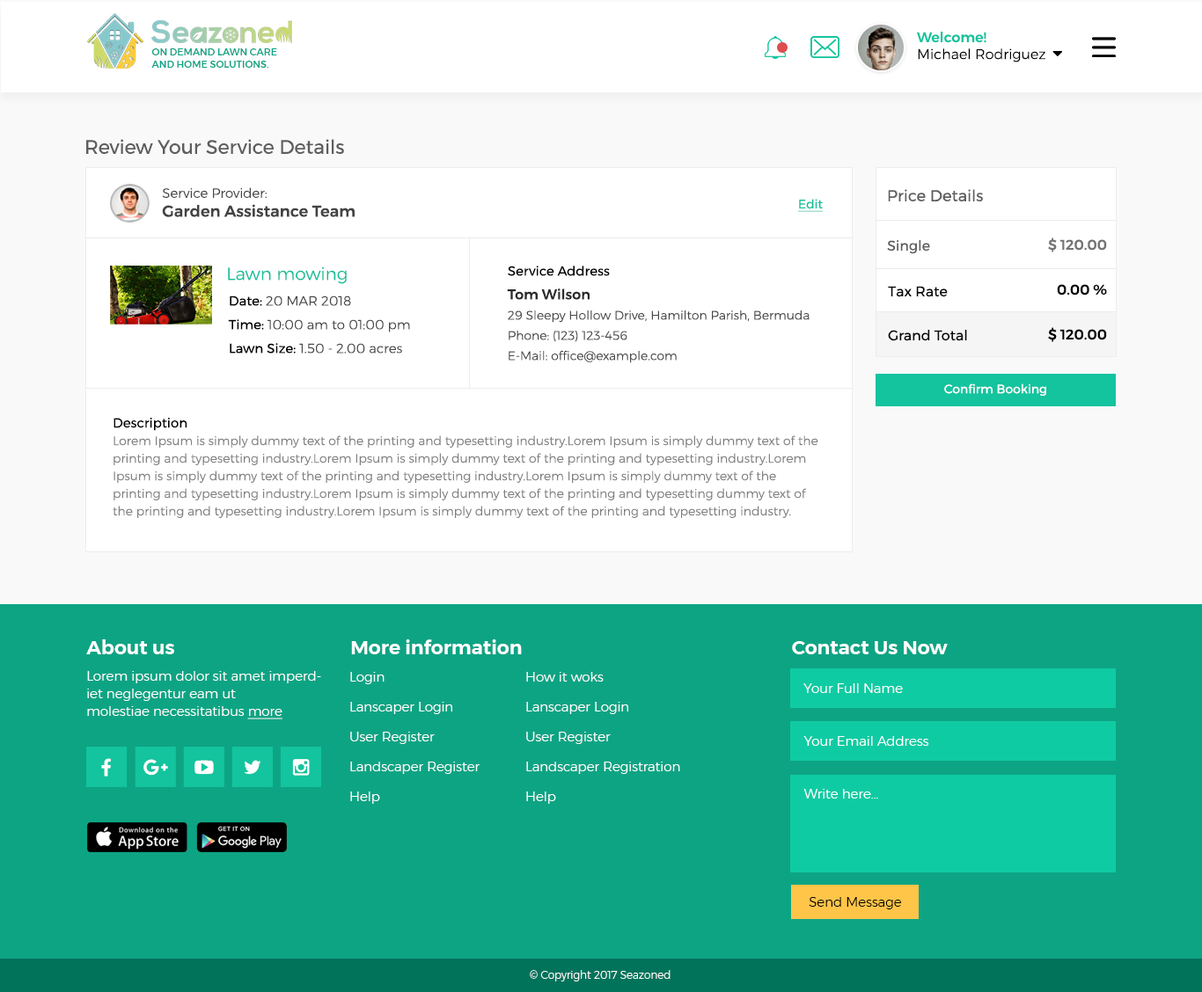
<style>
.page{position:relative;width:1202px;height:992px;background:#ffffff}
.page>*{position:absolute;margin:0}
.t1{font:14.1px "Montserrat-Light";color:#000000}
.t2{font:14.1px "Montserrat-Medium";color:#13c49e}
.t3{font:9.7px "Montserrat-Medium";color:#0da484;text-transform:uppercase}
.t4{font:19.4px "Montserrat-Regular";color:#5e5e5e}
.t5{font:15.8px "Montserrat-Medium";color:#434343}
.t6{font:13.2px "Montserrat-Light";color:#434343}
.t7{font:15.8px "Montserrat-Regular";color:#5e5e5e}
.t8{font:12.3px "Montserrat-Regular";color:#12bf9a;text-decoration:underline}
.t9{font:14.1px "Montserrat-Regular";color:#5e5e5e}
.t10{font:14.1px "Montserrat-Medium";color:#747474}
.t11{font:17.6px "Montserrat-Light";color:#12be99}
.t12{font:12.3px/20.2px "Montserrat-Light";color:#474747}
.t13{font:13.2px/23.8px "Montserrat-Regular";color:#000000}
.t14{font:14.1px/23.8px "Montserrat-Medium";color:#2b2b2b}
.t15{font:14.1px "Montserrat-Regular";color:#060606}
.t16{font:14.1px "Montserrat-Medium";color:#000000}
.t17{font:13.2px/23.8px "Montserrat-Light";color:#474747}
.t18{font:12.3px "Montserrat-Regular";color:#ffffff}
.t19{font:12.3px/17.6px "Montserrat-Light";color:#808080}
.t20{font:19.4px "Montserrat-SemiBold";color:#ffffff}
.t21{font:13.2px/17.6px "Montserrat-Light";color:#ffffff}
.t22{font:13.2px/17.6px "Montserrat-Light";color:#ffffff;text-decoration:underline}
.t23{font:13.2px/29.9px "Montserrat-Light";color:#ffffff}
.t24{font:13.2px "Montserrat-Light";color:#ffffff}
.t25{font:13.2px "Montserrat-Light";color:#000000}
.t26{font:10.6px "Montserrat-Light";color:#ffffff}
</style>
<div class="page">
<p class="t1" style="left:917px;top:32px;width:128px;height:30px"><span class="t2">Welcome! <br></span>Michael Rodriguez</p>
<p class="t3" style="left:151px;top:48px;width:126px;height:20px">on demand lawn care <br>and home solutions.</p>
<p class="t4" style="left:86px;top:139px;width:258px;height:15px">Review Your Service Details</p>
<p class="t5" style="left:162px;top:187px;width:193px;height:30px"><span class="t6">Service Provider:<br></span>Garden Assistance Team</p>
<p class="t7" style="left:888px;top:189px;width:95px;height:12px">Price Details</p>
<p class="t8" style="left:798px;top:199px;width:25px;height:13px">Edit</p>
<p class="t9" style="left:887px;top:240px;width:43px;height:14px">Single</p>
<p class="t10" style="left:1048px;top:238px;width:59px;height:14px">$ 120.00</p>
<p class="t11" style="left:228px;top:267px;width:119px;height:17px">Lawn mowing</p>
<p class="t12" style="left:507px;top:266px;width:302px;height:97px"><span class="t13">Service Address<br></span><span class="t14">Tom Wilson<br></span>29 Sleepy Hollow Drive, Hamilton Parish, Bermuda<br>Phone: (123) 123-456<br>E-Mail: office@example.com</p>
<p class="t15" style="left:888px;top:286px;width:59px;height:11px">Tax Rate</p>
<p class="t16" style="left:1057px;top:284px;width:50px;height:12px">0.00 %</p>
<p class="t17" style="left:228px;top:296px;width:182px;height:58px"><span class="t13">Date: </span>20 MAR 2018<br><span class="t13">Time: </span>10:00 am to 01:00 pm<br><span class="t13">Lawn Size: </span>1.50 - 2.00 acres</p>
<p class="t15" style="left:888px;top:330px;width:79px;height:11px">Grand Total</p>
<p class="t16" style="left:1048px;top:327px;width:59px;height:15px">$ 120.00</p>
<p class="t18" style="left:944px;top:384px;width:102px;height:12px">Confirm Booking</p>
<p class="t19" style="left:113px;top:418px;width:705px;height:100px"><span class="t13">Description <br></span>Lorem Ipsum is simply dummy text of the printing and typesetting industry.Lorem Ipsum is simply dummy text of the printing and typesetting industry.Lorem Ipsum is simply dummy text of the printing and typesetting industry.Lorem Ipsum is simply dummy text of the printing and typesetting industry.Lorem Ipsum is simply dummy text of the printing and typesetting industry.Lorem Ipsum is simply dummy text of the printing and typesetting dummy text of the printing and typesetting industry.Lorem Ipsum is simply dummy text of the printing and typesetting industry.</p>
<p class="t20" style="left:86px;top:640px;width:88px;height:15px">About us</p>
<p class="t20" style="left:351px;top:640px;width:171px;height:15px">More information</p>
<p class="t20" style="left:792px;top:641px;width:155px;height:14px">Contact Us Now</p>
<p class="t21" style="left:87px;top:671px;width:234px;height:49px">Lorem ipsum dolor sit amet imperdiet neglegentur eam ut<br>molestiae necessitatibus <span class="t22">more</span></p>
<p class="t23" style="left:350px;top:672px;width:129px;height:132px">Login<br>Lanscaper Login<br>User Register<br>Landscaper Register<br>Help</p>
<p class="t23" style="left:526px;top:672px;width:154px;height:132px">How it woks<br>Lanscaper Login<br>User Register<br>Landscaper Registration<br>Help</p>
<p class="t24" style="left:803px;top:684px;width:100px;height:9px">Your Full Name</p>
<p class="t24" style="left:803px;top:736px;width:126px;height:10px">Your Email Address</p>
<p class="t24" style="left:803px;top:789px;width:75px;height:10px">Write here...</p>
<p class="t25" style="left:808px;top:897px;width:94px;height:13px">Send Message</p>
<p class="t26" style="left:530px;top:970px;width:140px;height:12px">© Copyright 2017 Seazoned</p>
</div>
